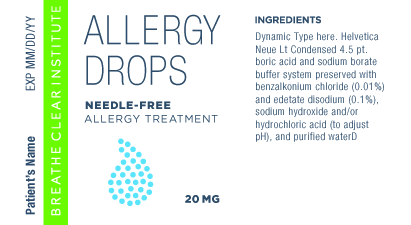
<style>
.page{position:relative;width:411px;height:225px;background:#ffffff}
.page>*{position:absolute;margin:0}
.t1{font:12.5px "HelveticaNeue-Condensed";letter-spacing:0.025em;color:#2d4b69}
.t2{font:10.4px "HelveticaNeue-LightCond";letter-spacing:0.05em;color:#2d4c6a}
.t3{font:12.5px "HelveticaNeue-BoldCond";letter-spacing:0.025em;color:#2d4b69}
</style>
<div class="page">
<p class="t1" style="left:25px;top:16px;width:10px;height:75px;rotate:-90deg">EXP MM/DD/YY</p>
<p class="t2" style="left:255px;top:32px;width:129px;height:110px">Dynamic Type here. Helvetica Neue Lt Condensed 4.5 pt. boric acid and sodium borate buffer system preserved with benzalkonium chloride (0.01%) and edetate disodium (0.1%), sodium hydroxide and/or hydrochloric acid (to adjust pH), and purified waterD</p>
<p class="t3" style="left:25px;top:136px;width:10px;height:79px;rotate:-90deg">Patient’s Name</p>
</div>
